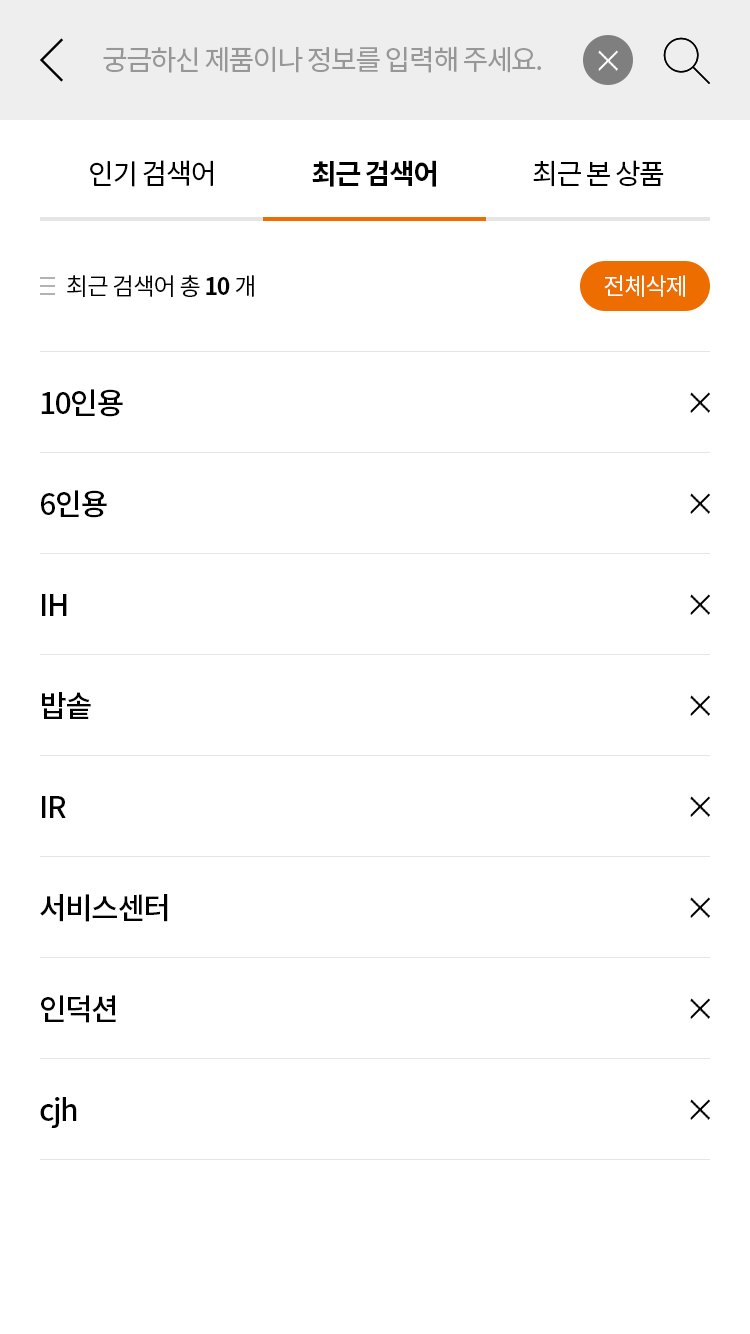
<style>
.page{position:relative;width:750px;height:1334px;background:#ffffff}
.page>*{position:absolute;margin:0}
.t1{font:28px "NotoSansCJKkr-Regular";letter-spacing:-0.05em;color:#979797}
.t2{font:28px "NotoSansCJKkr-Regular";letter-spacing:-0.05em;color:#000000}
.t3{font:28px "NotoSansCJKkr-Bold";letter-spacing:-0.05em;color:#000000}
.t4{font:24px "NotoSansCJKkr-Regular";letter-spacing:-0.05em;color:#000000}
.t5{font:24px "NotoSansCJKkr-Bold";letter-spacing:-0.05em;color:#000000}
.t6{font:24px "NotoSansCJKkr-Regular";letter-spacing:-0.05em;color:#ffffff}
.t7{font:30px "NotoSansCJKkr-Medium";letter-spacing:-0.05em;color:#000000}
</style>
<div class="page">
<p class="t1" style="left:103px;top:46px;width:438px;height:27px">궁금하신 제품이나 정보를 입력해 주세요.</p>
<p class="t2" style="left:90px;top:160px;width:123px;height:27px">인기 검색어</p>
<p class="t3" style="left:312px;top:160px;width:124px;height:27px">최근 검색어</p>
<p class="t2" style="left:533px;top:160px;width:131px;height:27px">최근 본 상품</p>
<p class="t4" style="left:67px;top:275px;width:187px;height:22px">최근 검색어 총 <span class="t5">10</span> 개</p>
<p class="t6" style="left:604px;top:275px;width:81px;height:22px">전체삭제</p>
<p class="t7" style="left:41px;top:389px;width:82px;height:28px">10인용</p>
<p class="t7" style="left:41px;top:490px;width:66px;height:28px">6인용</p>
<p class="t7" style="left:42px;top:594px;width:25px;height:22px">IH</p>
<p class="t7" style="left:42px;top:692px;width:49px;height:27px">밥솥</p>
<p class="t7" style="left:42px;top:796px;width:24px;height:22px">IR</p>
<p class="t7" style="left:40px;top:894px;width:128px;height:28px">서비스센터</p>
<p class="t7" style="left:41px;top:995px;width:75px;height:28px">인덕션</p>
<p class="t7" style="left:40px;top:1097px;width:37px;height:31px">cjh</p>
</div>
